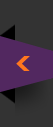
<style>
.page{position:relative;width:53px;height:127px;background:#333333}
.page>*{position:absolute;margin:0}
.t1{font:40px "Cabin-Bold";color:#ff771e}
</style>
<div class="page">
<p class="t1" style="left:16px;top:55px;width:15px;height:17px">&lt;</p>
</div>
